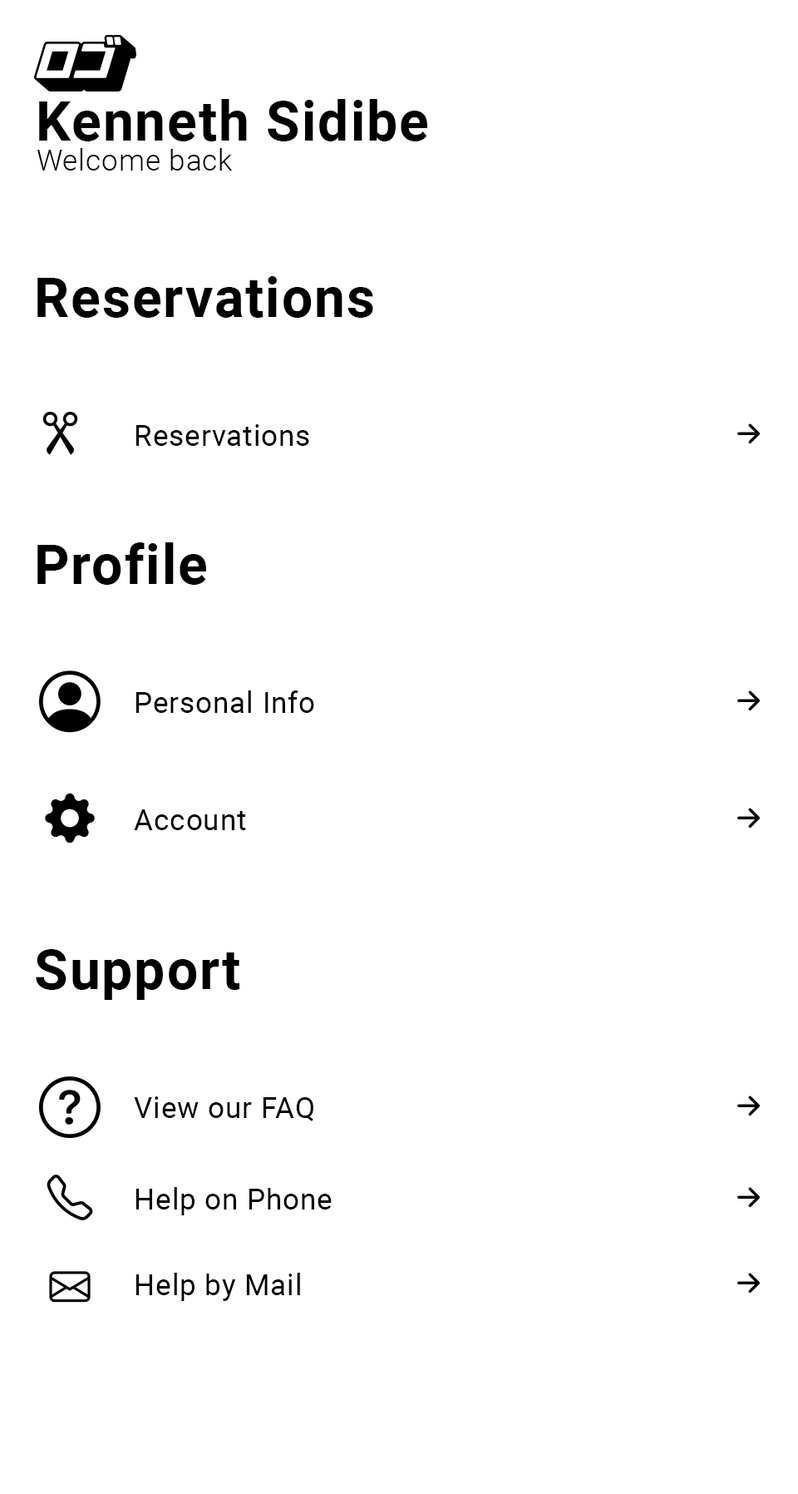
<style>
.page{position:relative;width:798px;height:1494px;background:#ffffff}
.page>*{position:absolute;margin:0}
.t1{font:54.8px "Roboto-Bold";letter-spacing:0.03em;color:#000000}
.t2{font:28.9px "Roboto-Light";letter-spacing:0.03em;color:#000000}
.t3{font:28.9px "Roboto-Regular";letter-spacing:0.03em;color:#000000}
</style>
<div class="page">
<p class="t1" style="left:39px;top:99px;width:388px;height:42px">Kenneth Sidibe</p>
<p class="t2" style="left:37px;top:148px;width:195px;height:22px">Welcome back</p>
<p class="t1" style="left:37px;top:276px;width:336px;height:42px">Reservations</p>
<p class="t3" style="left:136px;top:424px;width:173px;height:22px">Reservations</p>
<p class="t1" style="left:37px;top:542px;width:169px;height:43px">Profile</p>
<p class="t3" style="left:136px;top:690px;width:178px;height:23px">Personal Info</p>
<p class="t3" style="left:134px;top:809px;width:112px;height:21px">Account</p>
<p class="t1" style="left:36px;top:949px;width:204px;height:51px">Support</p>
<p class="t3" style="left:134px;top:1096px;width:180px;height:25px">View our FAQ</p>
<p class="t3" style="left:136px;top:1187px;width:196px;height:28px">Help on Phone</p>
<p class="t3" style="left:136px;top:1272px;width:164px;height:29px">Help by Mail</p>
</div>
